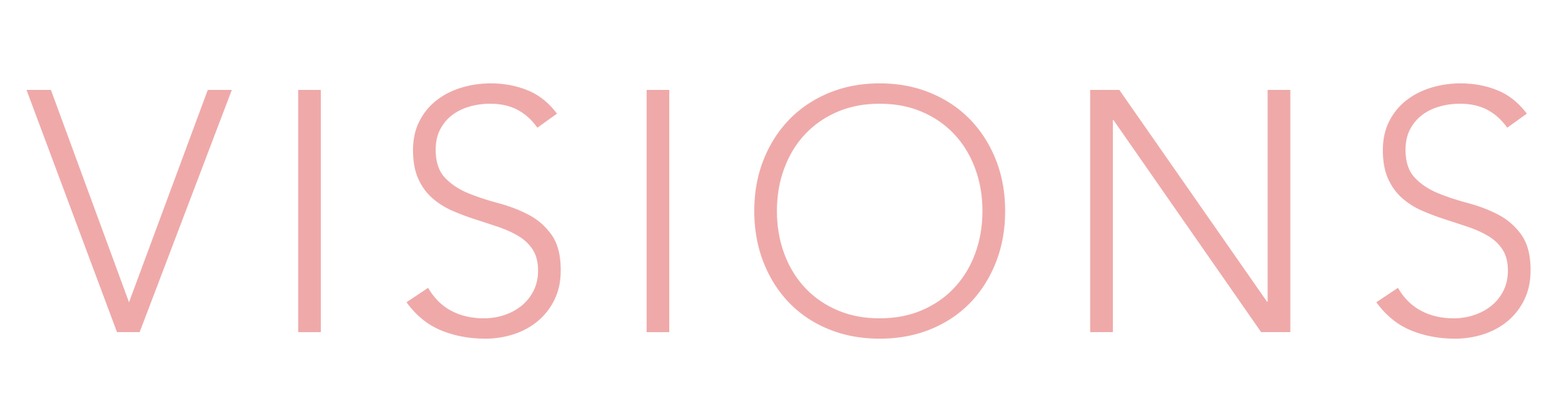
<style>
.page{position:relative;width:1568px;height:401px;background:#ffffff}
.page>*{position:absolute;margin:0}
.t1{font:342.9px "Avenir-Light";letter-spacing:0.1em;color:#efa9a9}
</style>
<div class="page">
<p class="t1" style="left:26px;top:83px;width:1505px;height:256px">VISIONS</p>
</div>
